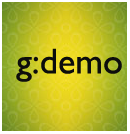
<style>
.page{position:relative;width:130px;height:134px}
.page>*{position:absolute;margin:0}
.t1{font:36px "GillSansMT";color:#0d0d0c}
</style>
<div class="page">
<p class="t1" style="left:16px;top:48px;width:106px;height:34px">g:demo</p>
</div>
